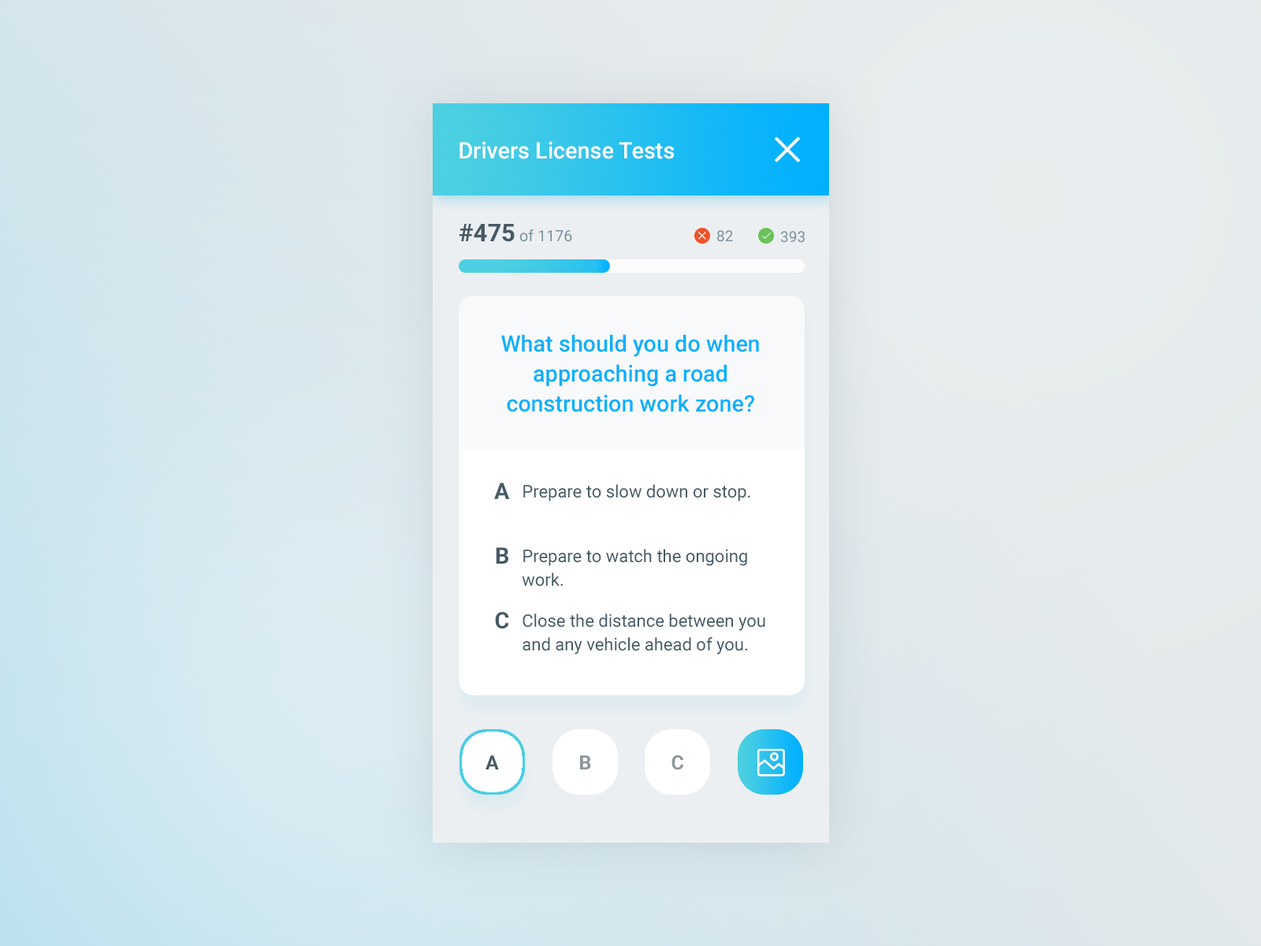
<style>
.page{position:relative;width:1261px;height:946px}
.page>*{position:absolute;margin:0}
.t1{font:22.7px "Roboto-Medium";color:#ffffff}
.t2{font:15.6px "Roboto-Regular";color:#78909c}
.t3{font:24.5px "Roboto-Bold";color:#455a64;text-transform:uppercase}
.t4{font:15px "Roboto-Regular";color:#78909c;text-transform:uppercase}
.t5{font:22.7px/29.9px "Roboto-Medium";color:#01b0fe}
.t6{font:22.7px/64.6px "Roboto-Bold";color:#455a64}
.t7{font:17.3px "Roboto-Regular";color:#455a64}
.t8{font:17.3px/23.6px "Roboto-Regular";color:#455a64}
.t9{font:19.7px "Roboto-Bold";color:#455a64}
.t10{font:19.7px "Roboto-Bold";color:#8c979c}
</style>
<div class="page">
<p class="t1" style="left:459px;top:141px;width:215px;height:18px">Drivers License Tests</p>
<p class="t2" style="left:459px;top:224px;width:113px;height:18px"><span class="t3">#475 </span>of 1176</p>
<p class="t4" style="left:717px;top:230px;width:16px;height:12px">82</p>
<p class="t4" style="left:780px;top:231px;width:25px;height:12px">393</p>
<p class="t5" style="left:501px;top:334px;width:258px;height:78px;text-align:center">What should you do when approaching a road construction work zone?</p>
<p class="t6" style="left:494px;top:482px;width:16px;height:147px;text-align:right">A<br>B<br>C</p>
<p class="t7" style="left:523px;top:484px;width:227px;height:17px">Prepare to slow down or stop.</p>
<p class="t8" style="left:522px;top:548px;width:225px;height:38px">Prepare to watch the ongoing work.</p>
<p class="t8" style="left:522px;top:613px;width:243px;height:41px">Close the distance between you and any vehicle ahead of you.</p>
<p class="t9" style="left:485px;top:755px;width:14px;height:14px">A</p>
<p class="t10" style="left:580px;top:755px;width:11px;height:14px">B</p>
<p class="t10" style="left:671px;top:755px;width:12px;height:15px">C</p>
</div>
